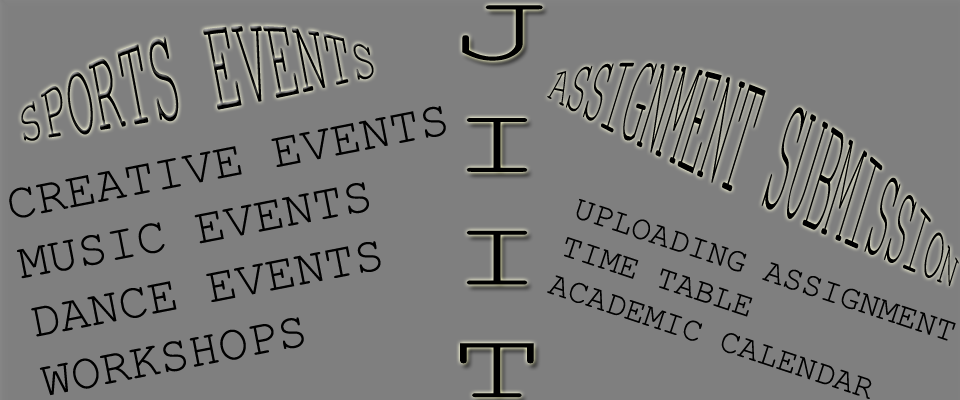
<style>
.page{position:relative;width:960px;height:400px;background:#7f7f7f}
.page>*{position:absolute;margin:0}
.t1{font:93.9px "CourierNewPSMT";color:#000000;scale:1.7 1}
.t2{font:44.1px "CourierNewPSMT";color:#000000;scale:1.06 1}
.t3{font:41.3px "CourierNewPSMT";color:#000000;scale:0.86 1}
.t4{font:50px "CourierNewPSMT";color:#000000}
.t5{font:33.3px "CourierNewPSMT";color:#000000}
</style>
<div class="page">
<p class="t1" style="left:460px;top:5px;width:83px;height:393px">J<br>I<br>I<br>T</p>
<p class="t2" style="left:21px;top:25px;width:353px;height:116px;rotate:-10deg">SPORTS EVENTS</p>
<p class="t3" style="left:547px;top:62px;width:412px;height:224px;rotate:25deg">ASSIGNMENT SUBMISSION</p>
<p class="t4" style="left:9px;top:106px;width:437px;height:290px;rotate:-11deg">CREATIVE EVENTS<br>MUSIC EVENTS<br>DANCE EVENTS<br>WORKSHOPS</p>
<p class="t5" style="left:547px;top:198px;width:409px;height:201px;rotate:18deg">UPLOADING ASSIGNMENT<br>TIME TABLE<br>ACADEMIC CALENDAR</p>
</div>
